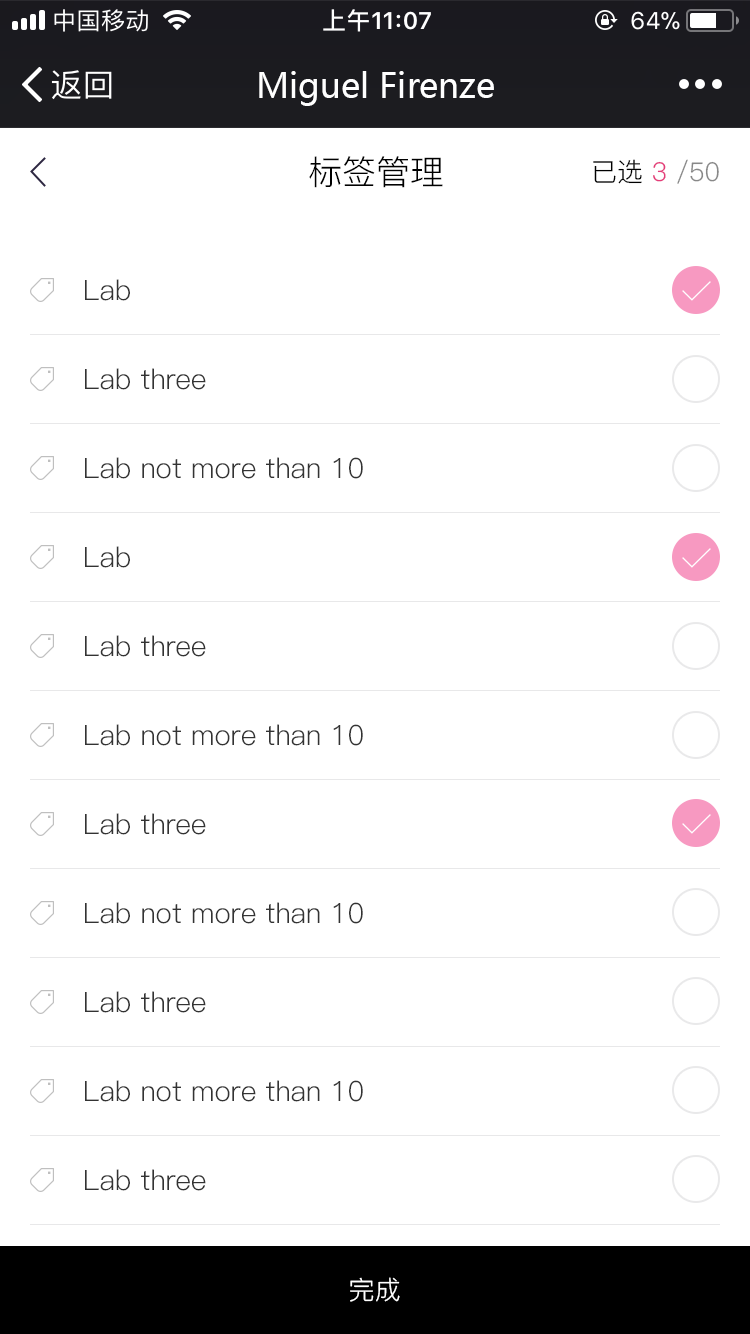
<style>
.page{position:relative;width:750px;height:1334px;background:#ffffff}
.page>*{position:absolute;margin:0}
.t1{font:34px "MicrosoftYaHei";color:#ffffff}
.t2{font:34px "PingFang-SC-Regular";color:#000000}
.t3{font:26px "PingFang-SC-Regular";color:#888888}
.t4{font:26px "PingFang-SC-Regular";color:#000000}
.t5{font:26px "PingFang-SC-Regular";color:#e43d7a}
.t6{font:28px "PingFang-SC-Regular";color:#333333}
.t7{font:26px "PingFang-SC-Regular";color:#ffffff}
</style>
<div class="page">
<p class="t1" style="left:259px;top:71px;width:235px;height:35px">Miguel Firenze</p>
<p class="t2" style="left:309px;top:156px;width:134px;height:32px">标签管理</p>
<p class="t3" style="left:593px;top:159px;width:126px;height:25px"><span class="t4">已选 </span><span class="t5">3 </span>/50</p>
<p class="t6" style="left:85px;top:279px;width:45px;height:22px">Lab</p>
<p class="t6" style="left:85px;top:368px;width:121px;height:22px">Lab three</p>
<p class="t6" style="left:85px;top:457px;width:278px;height:22px">Lab not more than 10</p>
<p class="t6" style="left:85px;top:546px;width:45px;height:22px">Lab</p>
<p class="t6" style="left:85px;top:635px;width:121px;height:22px">Lab three</p>
<p class="t6" style="left:85px;top:724px;width:278px;height:22px">Lab not more than 10</p>
<p class="t6" style="left:85px;top:813px;width:121px;height:22px">Lab three</p>
<p class="t6" style="left:85px;top:902px;width:278px;height:22px">Lab not more than 10</p>
<p class="t6" style="left:85px;top:991px;width:121px;height:22px">Lab three</p>
<p class="t6" style="left:85px;top:1080px;width:278px;height:22px">Lab not more than 10</p>
<p class="t6" style="left:85px;top:1169px;width:121px;height:22px">Lab three</p>
<p class="t7" style="left:350px;top:1277px;width:50px;height:25px">完成</p>
</div>
